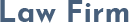
<style>
.page{position:relative;width:129px;height:23px;background:#ffffff}
.page>*{position:absolute;margin:0}
.t1{font:30px "JosefinSans-Bold";color:#475f7b}
</style>
<div class="page">
<p class="t1" style="left:0px;top:0px;width:129px;height:23px">Law Firm</p>
</div>
